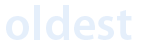
<style>
.page{position:relative;width:155px;height:45px;background:#ffffff}
.page>*{position:absolute;margin:0}
.t1{font:48px "MyriadPro-Semibold";color:#e5effb}
</style>
<div class="page">
<p class="t1" style="left:6px;top:5px;width:126px;height:35px">oldest</p>
</div>
